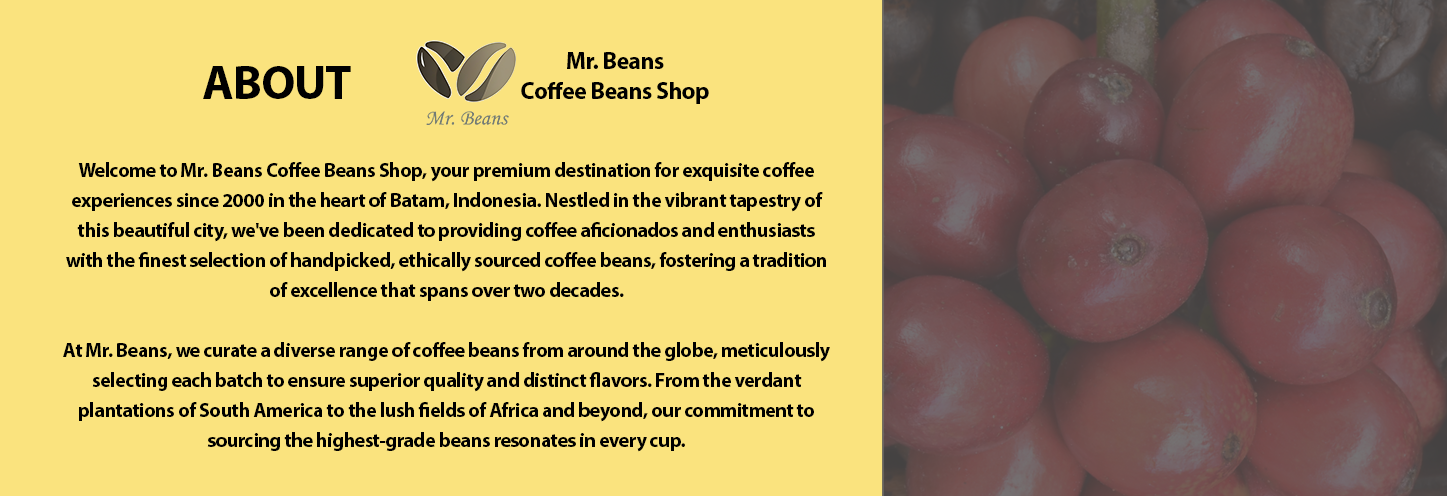
<style>
.page{position:relative;width:1447px;height:496px;background:#fae37e}
.page>*{position:absolute;margin:0}
.t1{font:24px/30px "MyriadPro-Bold";letter-spacing:-0.025em;color:#000000}
.t2{font:48px "MyriadPro-Bold";letter-spacing:-0.025em;color:#000000}
.t3{font:20px/30px "MyriadPro-Bold";letter-spacing:-0.025em;color:#000000}
</style>
<div class="page">
<p class="t1" style="left:521px;top:52px;width:188px;height:52px;text-align:center">Mr. Beans <br>Coffee Beans Shop</p>
<p class="t2" style="left:203px;top:66px;width:148px;height:33px">ABOUT</p>
<p class="t3" style="left:63px;top:162px;width:767px;height:290px;text-align:center">Welcome to Mr. Beans Coffee Beans Shop, your premium destination for exquisite coffee experiences since 2000 in the heart of Batam, Indonesia. Nestled in the vibrant tapestry of this beautiful city, we've been dedicated to providing coffee aficionados and enthusiasts with the finest selection of handpicked, ethically sourced coffee beans, fostering a tradition of excellence that spans over two decades.<br><br>At Mr. Beans, we curate a diverse range of coffee beans from around the globe, meticulously selecting each batch to ensure superior quality and distinct flavors. From the verdant plantations of South America to the lush fields of Africa and beyond, our commitment to sourcing the highest-grade beans resonates in every cup.</p>
</div>
